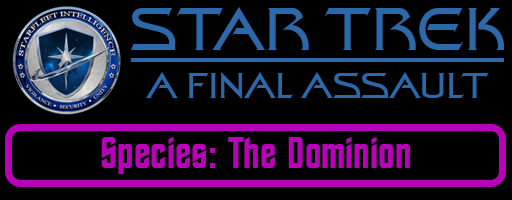
<style>
.page{position:relative;width:512px;height:200px;background:#000000}
.page>*{position:absolute;margin:0}
.t1{font:60px "StarTrekFilmBT-Regular";color:#2d68a9}
.t2{font:36px "StarTrekFilmBT-Regular";color:#2d68a9}
.t3{font:44px "StarTrekBT-Regular";color:#b900b9}
</style>
<div class="page">
<p class="t1" style="left:131px;top:7px;width:373px;height:43px">STAR TREK</p>
<p class="t2" style="left:146px;top:72px;width:343px;height:27px">A FINAL ASSAULT</p>
<p class="t3" style="left:101px;top:137px;width:309px;height:37px">Species: The Dominion</p>
</div>
